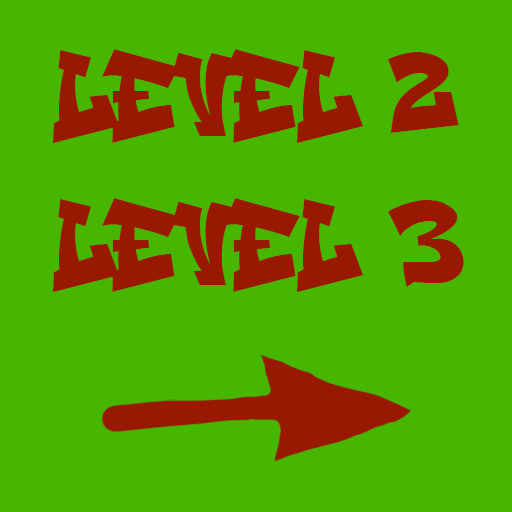
<style>
.page{position:relative;width:512px;height:512px;background:#46b600}
.page>*{position:absolute;margin:0}
.t1{font:100px "FASTBLAZE";color:#981800}
</style>
<div class="page">
<p class="t1" style="left:53px;top:49px;width:406px;height:95px">level 2</p>
<p class="t1" style="left:53px;top:198px;width:411px;height:95px">level 3</p>
</div>
